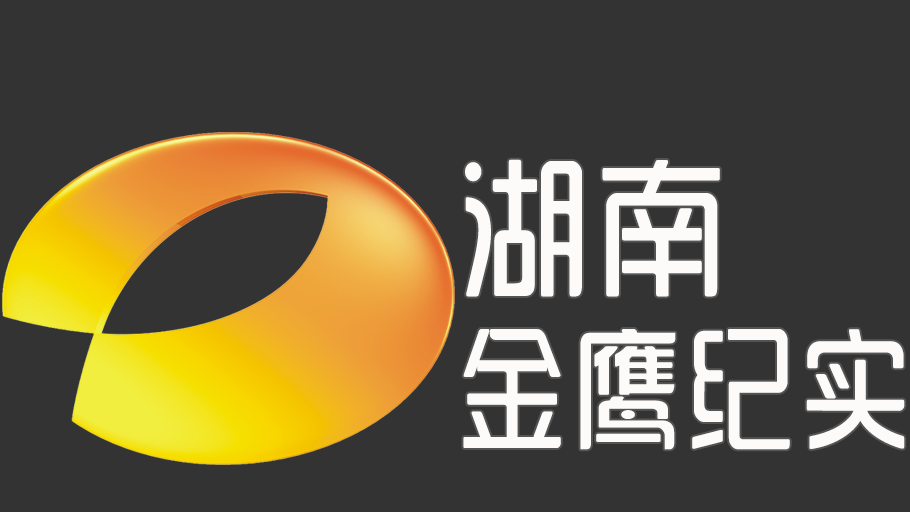
<style>
.page{position:relative;width:910px;height:512px;background:#333333}
.page>*{position:absolute;margin:0}
.t1{font:132px/170px "SJyunlvyuan";letter-spacing:0.02em;color:#fcfbf9;scale:0.85 1}
.t2{font:150px/170px "SJyunlvyuan";letter-spacing:0.02em;color:#fcfbf9;scale:0.9 1}
</style>
<div class="page">
<p class="t1" style="left:463px;top:159px;width:442px;height:291px"><span class="t2">湖南<br></span>金鹰纪实</p>
</div>
